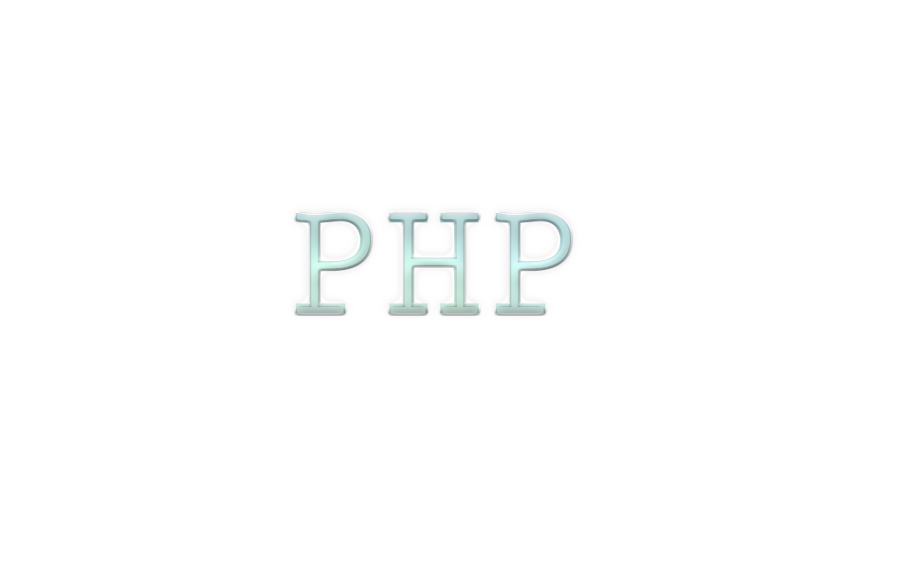
<style>
.page{position:relative;width:908px;height:580px;background:#ffffff}
.page>*{position:absolute;margin:0}
.t1{font:166.6px "PrestigeEliteStd-Bd"}
.t2{font:166.6px "PrestigeEliteStd";color:#c0dedb}
</style>
<div class="page">
<p class="t1" style="left:295px;top:212px;width:276px;height:101px">PHP</p>
<p class="t2" style="left:297px;top:212px;width:273px;height:101px">PHP</p>
</div>
